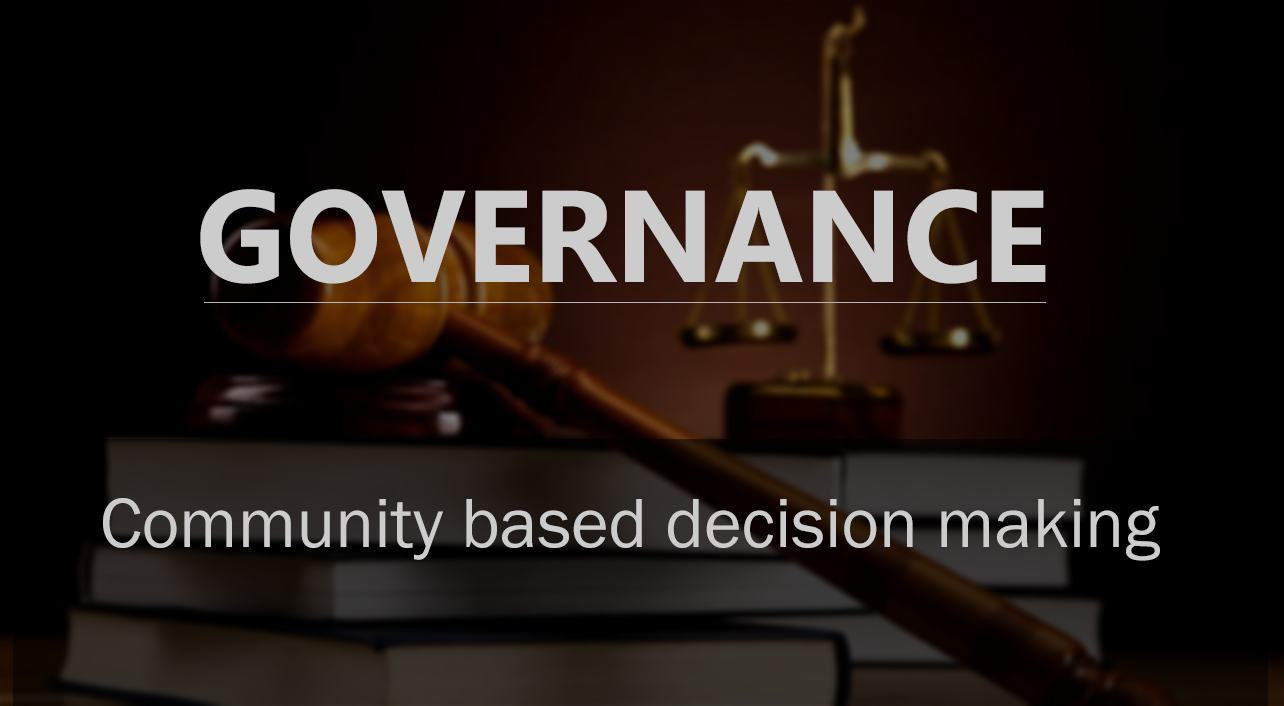
<style>
.page{position:relative;width:1284px;height:706px;background:#000000}
.page>*{position:absolute;margin:0}
.t1{font:130px "MicrosoftTaiLe-Bold";color:#cccccc}
.t2{font:72px "FranklinGothic-Book";color:#cccccc}
</style>
<div class="page">
<p class="t1" style="left:200px;top:189px;width:846px;height:95px">GOVERNANCE</p>
<p class="t2" style="left:103px;top:498px;width:1057px;height:63px">Community based decision making</p>
</div>
